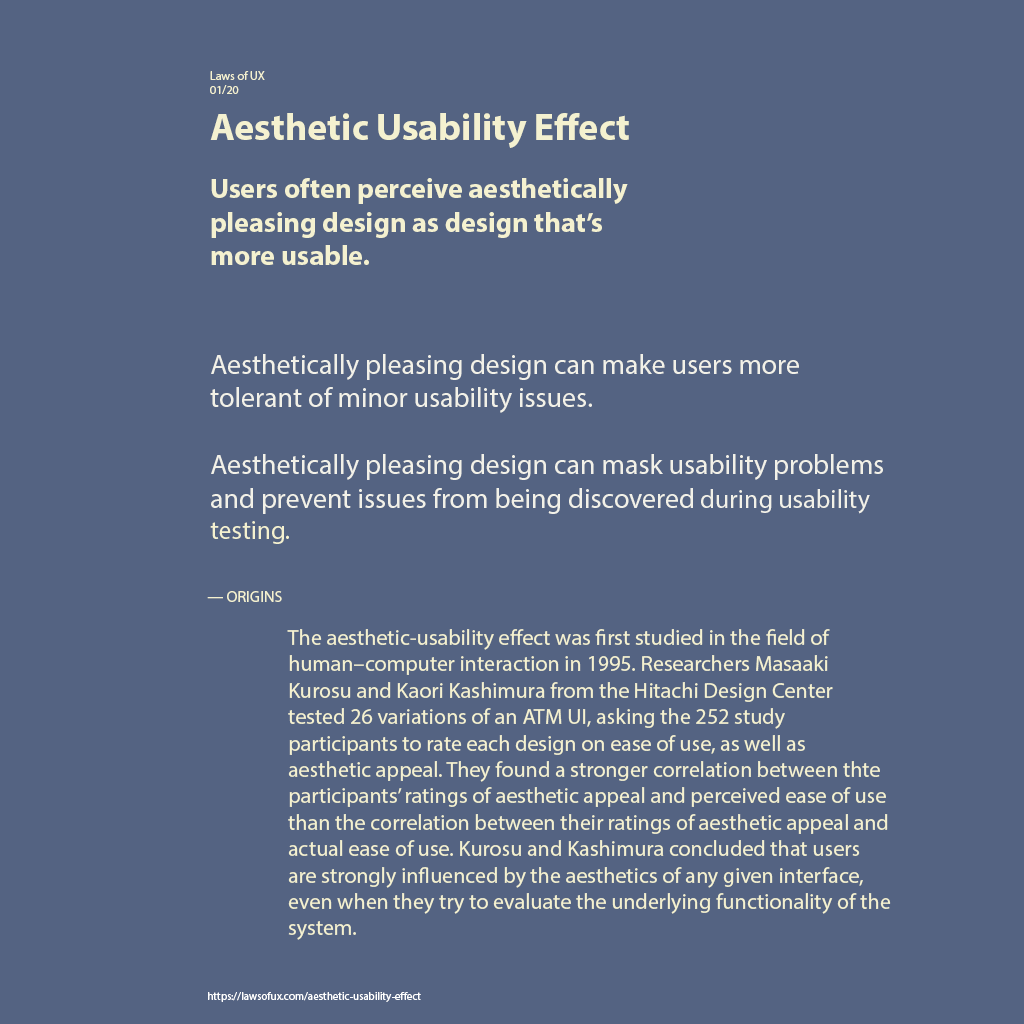
<style>
.page{position:relative;width:1024px;height:1024px;background:#546382}
.page>*{position:absolute;margin:0}
.t1{font:38px "MyriadPro-Bold";color:#f4f1d0}
.t2{font:12px "MyriadPro-Regular";color:#f4f1d0}
.t3{font:28px "MyriadPro-Bold";color:#f4f1d0}
.t4{font:28px "MyriadPro-Regular";color:#f2f1e8}
.t5{font:26px "MyriadPro-Regular";color:#f2f1e8}
.t6{font:26px "MyriadPro-Regular";color:#f4f1d0}
.t7{font:16px "MyriadPro-Regular";color:#f4f1d0}
.t8{font:22px "MyriadPro-Regular";color:#f4f1d0}
.t9{font:11px "MyriadPro-Regular";color:#ffffff}
</style>
<div class="page">
<p class="t1" style="left:210px;top:71px;width:419px;height:77px"><span class="t2">Laws of UX  <br>01/20<br></span>Aesthetic Usability Effect</p>
<p class="t3" style="left:211px;top:178px;width:417px;height:87px">Users often perceive aesthetically pleasing design as design that’s more usable.</p>
<p class="t4" style="left:210px;top:354px;width:673px;height:190px">Aesthetically pleasing design can make users more tolerant of minor usability issues.<br><br>Aesthetically pleasing design can mask usability problems and prevent issues from being discovered <span class="t5">during usability </span><span class="t6">testing.</span></p>
<p class="t7" style="left:207px;top:591px;width:75px;height:11px">— ORIGINS</p>
<p class="t8" style="left:287px;top:629px;width:604px;height:311px">The aesthetic-usability effect was first studied in the field of human–computer interaction in 1995. Researchers Masaaki Kurosu and Kaori Kashimura from the Hitachi Design Center tested 26 variations of an ATM UI, asking the 252 study participants to rate each design on ease of use, as well as aesthetic appeal. They found a stronger correlation between thte participants’ ratings of aesthetic appeal and perceived ease of use than the correlation between their ratings of aesthetic appeal and actual ease of use. Kurosu and Kashimura concluded that users are strongly influenced by the aesthetics of any given interface, even when they try to evaluate the underlying functionality of the system.</p>
<p class="t9" style="left:208px;top:992px;width:213px;height:10px">https://lawsofux.com/aesthetic-usability-effect</p>
</div>
